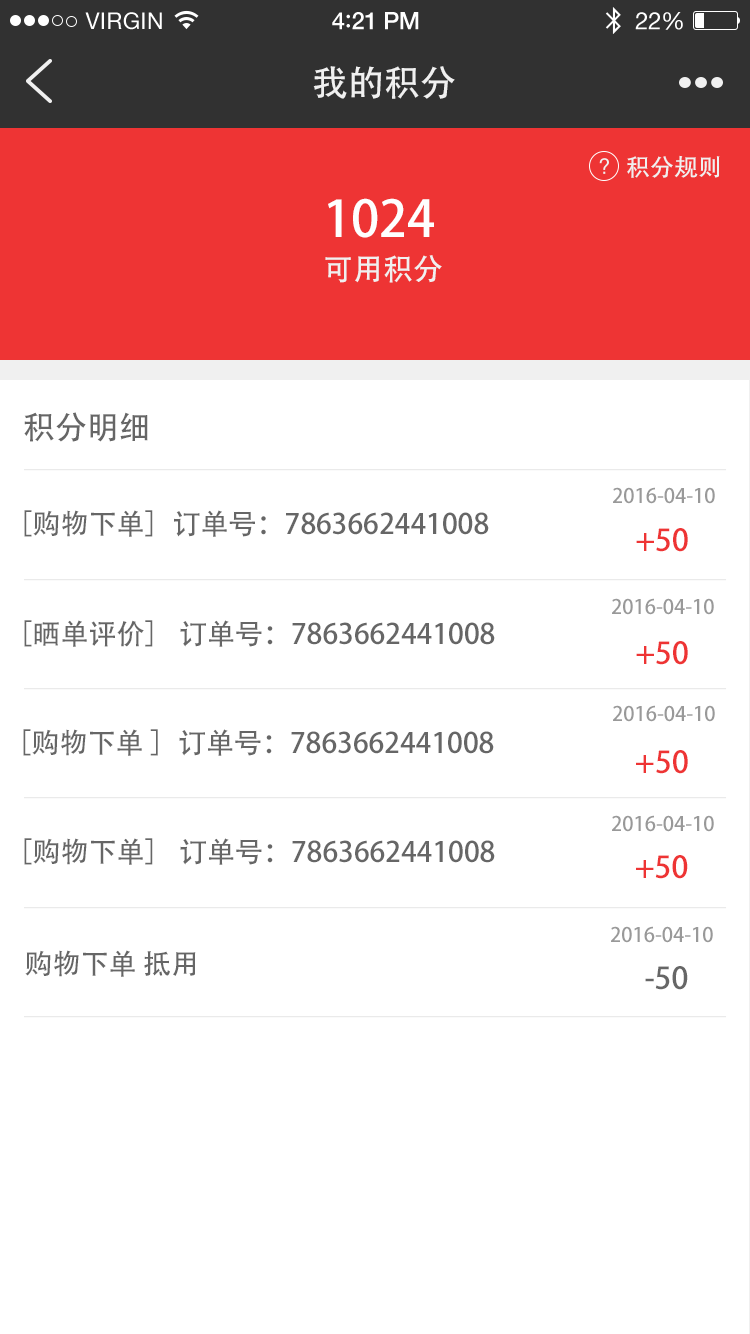
<style>
.page{position:relative;width:750px;height:1334px;background:#ffffff}
.page>*{position:absolute;margin:0}
.t1{font:36px "AdobeHeitiStd-Regular";color:#f0f0f0}
.t2{font:24px "AdobeHeitiStd-Regular";color:#f0f0f0}
.t3{font:50px "AdobeHeitiStd-Regular";color:#fefefe}
.t4{font:30px "AdobeHeitiStd-Regular";color:#f0f0f0}
.t5{font:32px "AdobeHeitiStd-Regular";color:#666666}
.t6{font:20px "AdobeHeitiStd-Regular";color:#999999}
.t7{font:28px "AdobeHeitiStd-Regular";color:#666666}
.t8{font:30px "AdobeHeitiStd-Regular";color:#ee3434}
.t9{font:30px "AdobeHeitiStd-Regular";color:#666666}
</style>
<div class="page">
<p class="t1" style="left:313px;top:66px;width:142px;height:33px">我的积分</p>
<p class="t2" style="left:627px;top:155px;width:93px;height:23px">积分规则</p>
<p class="t3" style="left:328px;top:198px;width:106px;height:40px">1024</p>
<p class="t4" style="left:325px;top:255px;width:117px;height:28px">可用积分</p>
<p class="t5" style="left:24px;top:412px;width:124px;height:30px">积分明细</p>
<p class="t6" style="left:613px;top:487px;width:102px;height:17px">2016-04-10</p>
<p class="t7" style="left:24px;top:510px;width:465px;height:27px">［购物下单］订单号：7863662441008</p>
<p class="t8" style="left:636px;top:528px;width:52px;height:24px">+50</p>
<p class="t6" style="left:612px;top:598px;width:102px;height:17px">2016-04-10</p>
<p class="t7" style="left:24px;top:620px;width:471px;height:27px">［晒单评价］ 订单号：7863662441008</p>
<p class="t8" style="left:636px;top:641px;width:52px;height:24px">+50</p>
<p class="t6" style="left:613px;top:705px;width:102px;height:17px">2016-04-10</p>
<p class="t7" style="left:23px;top:729px;width:471px;height:27px">［购物下单 ］订单号：7863662441008</p>
<p class="t8" style="left:636px;top:750px;width:52px;height:24px">+50</p>
<p class="t6" style="left:612px;top:815px;width:102px;height:17px">2016-04-10</p>
<p class="t7" style="left:24px;top:838px;width:471px;height:27px">［购物下单］ 订单号：7863662441008</p>
<p class="t8" style="left:636px;top:855px;width:52px;height:24px">+50</p>
<p class="t6" style="left:611px;top:926px;width:102px;height:17px">2016-04-10</p>
<p class="t7" style="left:25px;top:950px;width:171px;height:27px">购物下单 抵用</p>
<p class="t9" style="left:645px;top:966px;width:43px;height:24px">-50</p>
</div>
